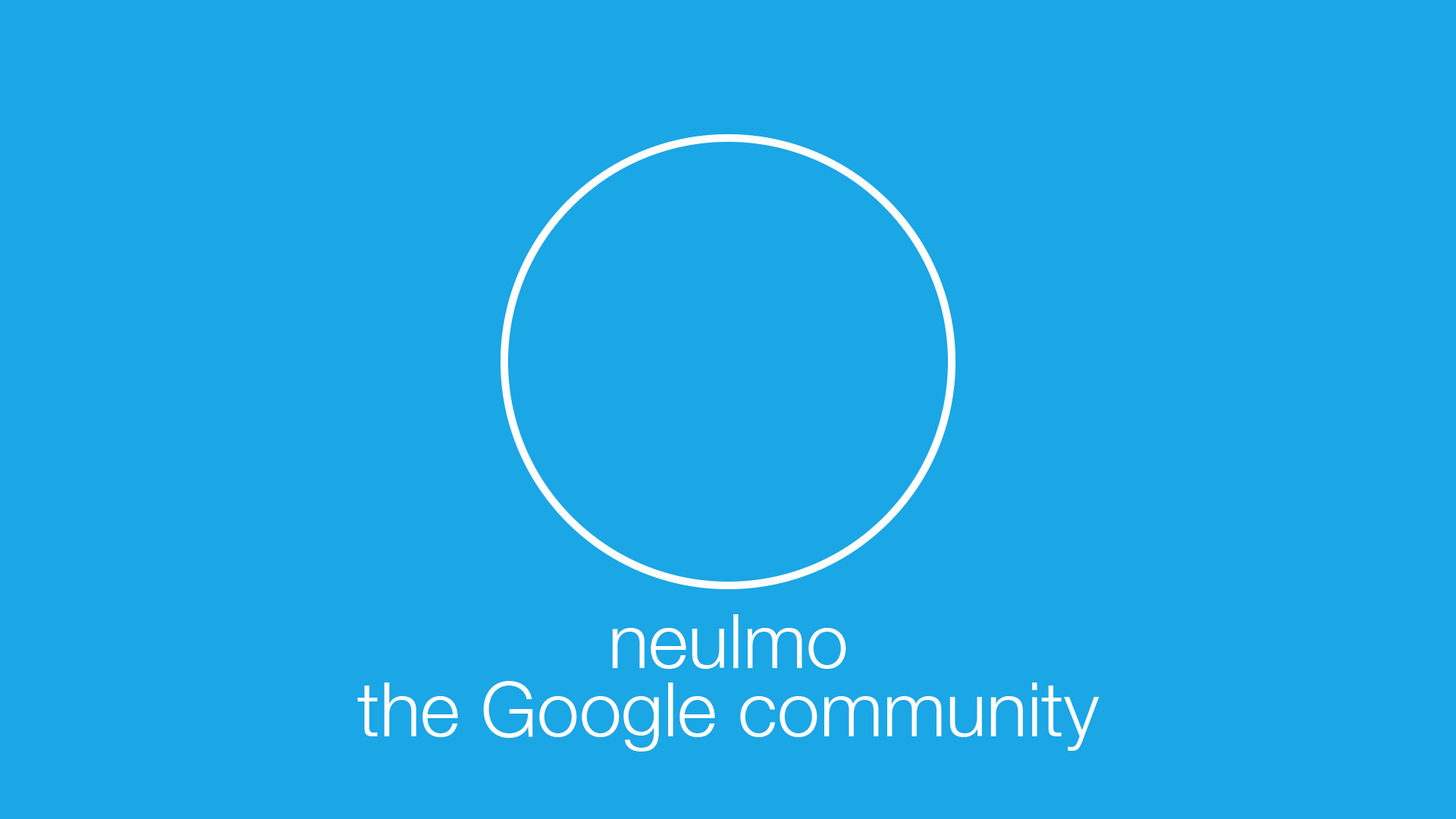
<style>
.page{position:relative;width:1456px;height:819px;background:#1ba6e6}
.page>*{position:absolute;margin:0}
.t1{font:75.8px/68.2px "HelveticaNeue-Light";color:#ffffff}
</style>
<div class="page">
<p class="t1" style="left:357px;top:614px;width:743px;height:137px;text-align:center">neulmo<br>the Google community</p>
</div>
